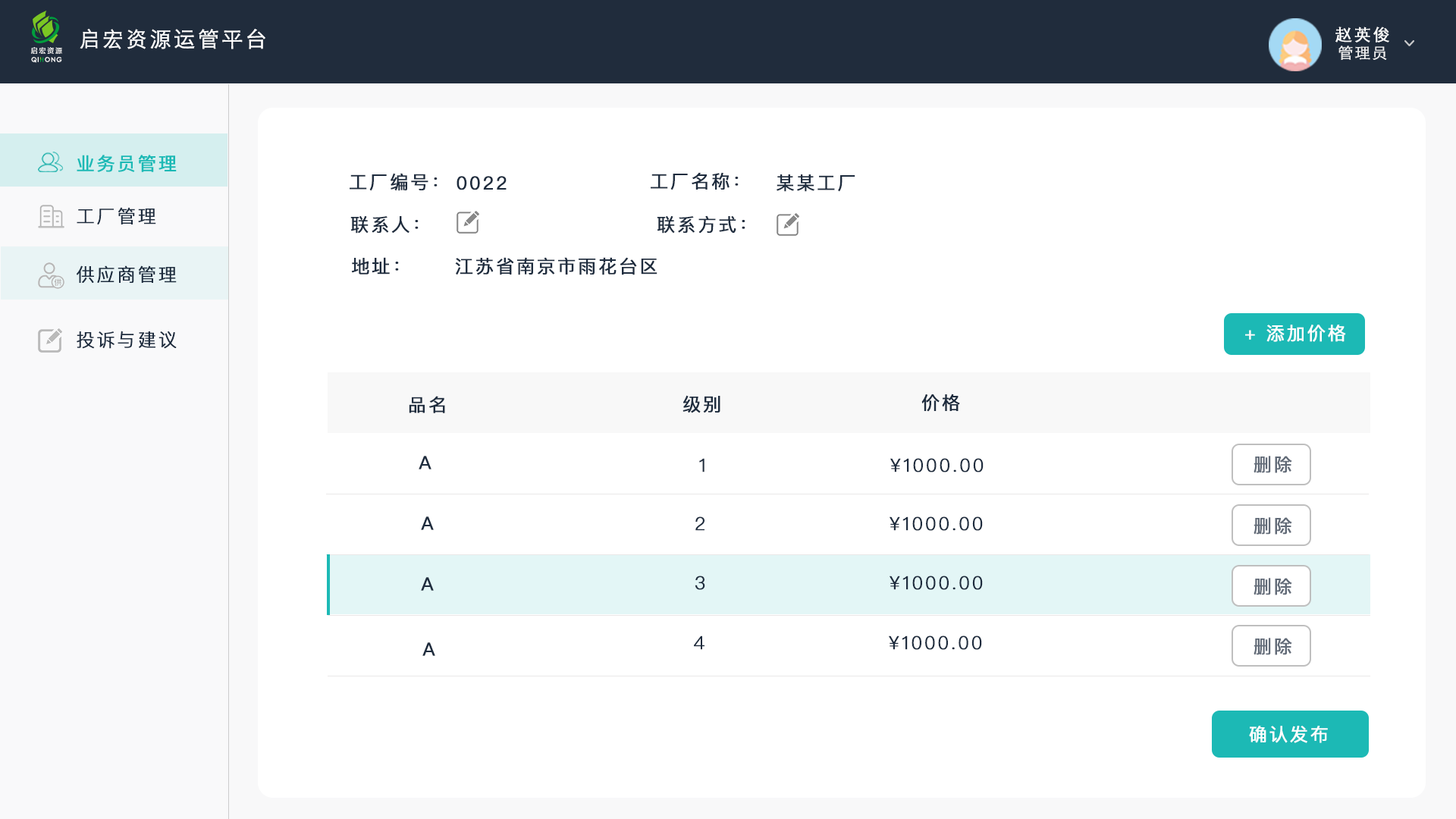
<style>
.page{position:relative;width:1456px;height:819px;background:#ffffff}
.page>*{position:absolute;margin:0}
.t1{font:21.2px "STHeitiSC-Light";letter-spacing:0.1em;color:#ffffff;font-weight:bold}
.t2{font:16.7px "STHeitiSC-Light";letter-spacing:0.1em;color:#ffffff;font-weight:bold}
.t3{font:7px "FZLTZHK--GBK1-0";letter-spacing:0.18em;color:#ffffff}
.t4{font:15.2px "STHeitiSC-Light";letter-spacing:0.1em;color:#ffffff;font-weight:bold}
.t5{font:6.3px "CenturyGothic";letter-spacing:0.1em;color:#ffffff;font-weight:bold}
.t6{font:18.2px "PingFangSC-Regular";letter-spacing:0.1em;color:#1cb9b5;font-weight:bold}
.t7{font:18.2px "PingFangSC-Regular";letter-spacing:0.1em;color:#1e2c3e;font-weight:bold}
.t8{font:18.2px "PingFangSC-Light";letter-spacing:0.1em;color:#1e2c3e;font-weight:bold}
.t9{font:18.2px "PingFangSC-Regular";letter-spacing:0.1em;color:#ffffff;font-weight:bold}
.t10{font:18.2px "PingFangSC-Regular";letter-spacing:0.1em;color:#626b78;font-weight:bold}
</style>
<div class="page">
<p class="t1" style="left:80px;top:29px;width:185px;height:20px">启宏资源运管平台</p>
<p class="t2" style="left:1335px;top:27px;width:54px;height:15px">赵英俊</p>
<p class="t3" style="left:31px;top:47px;width:31px;height:7px">启宏资源</p>
<p class="t4" style="left:1338px;top:45px;width:49px;height:15px;opacity:0.9">管理员</p>
<p class="t5" style="left:31px;top:57px;width:31px;height:6px">QI  ONG</p>
<p class="t6" style="left:77px;top:155px;width:100px;height:17px">业务员管理</p>
<p class="t7" style="left:350px;top:173px;width:88px;height:18px">工厂编号：</p>
<p class="t7" style="left:651px;top:172px;width:88px;height:18px">工厂名称：</p>
<p class="t7" style="left:457px;top:176px;width:50px;height:14px">0022</p>
<p class="t7" style="left:777px;top:174px;width:78px;height:18px">某某工厂</p>
<p class="t8" style="left:77px;top:207px;width:79px;height:17px">工厂管理</p>
<p class="t7" style="left:350px;top:216px;width:69px;height:18px">联系人：</p>
<p class="t7" style="left:657px;top:215px;width:88px;height:19px">联系方式：</p>
<p class="t7" style="left:351px;top:257px;width:48px;height:18px">地址：</p>
<p class="t7" style="left:455px;top:257px;width:202px;height:18px">江苏省南京市雨花台区</p>
<p class="t8" style="left:77px;top:265px;width:100px;height:18px">供应商管理</p>
<p class="t9" style="left:1245px;top:325px;width:101px;height:17px">+ 添加价格</p>
<p class="t8" style="left:77px;top:331px;width:100px;height:18px">投诉与建议</p>
<p class="t7" style="left:409px;top:396px;width:36px;height:17px">品名</p>
<p class="t7" style="left:682px;top:395px;width:38px;height:18px">级别</p>
<p class="t7" style="left:921px;top:394px;width:39px;height:18px">价格</p>
<p class="t7" style="left:419px;top:456px;width:12px;height:13px">A</p>
<p class="t8" style="left:699px;top:458px;width:5px;height:14px">1</p>
<p class="t8" style="left:890px;top:458px;width:94px;height:14px">¥1000.00</p>
<p class="t10" style="left:1254px;top:456px;width:38px;height:17px">删除</p>
<p class="t7" style="left:421px;top:516px;width:13px;height:14px">A</p>
<p class="t8" style="left:695px;top:516px;width:9px;height:15px">2</p>
<p class="t8" style="left:890px;top:516px;width:93px;height:15px">¥1000.00</p>
<p class="t10" style="left:1254px;top:517px;width:38px;height:18px">删除</p>
<p class="t7" style="left:421px;top:577px;width:13px;height:14px">A</p>
<p class="t8" style="left:695px;top:576px;width:10px;height:14px">3</p>
<p class="t8" style="left:890px;top:576px;width:93px;height:14px">¥1000.00</p>
<p class="t10" style="left:1254px;top:578px;width:38px;height:17px">删除</p>
<p class="t8" style="left:694px;top:635px;width:10px;height:15px">4</p>
<p class="t8" style="left:889px;top:635px;width:93px;height:15px">¥1000.00</p>
<p class="t10" style="left:1254px;top:638px;width:38px;height:17px">删除</p>
<p class="t7" style="left:422px;top:642px;width:13px;height:14px">A</p>
<p class="t9" style="left:1249px;top:726px;width:79px;height:17px">确认发布</p>
</div>
